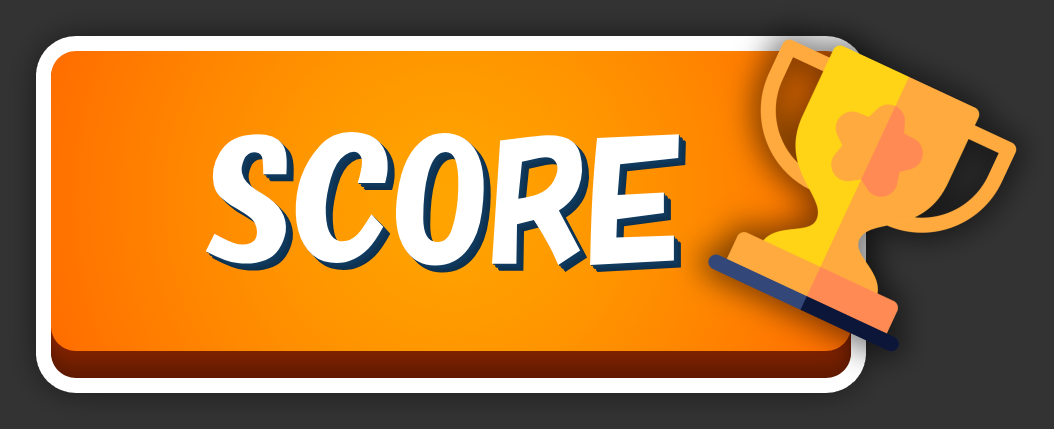
<style>
.page{position:relative;width:1054px;height:429px}
.page>*{position:absolute;margin:0}
.t1{font:160px "HGPSoeiKakupoptai";color:#ffffff}
</style>
<div class="page">
<p class="t1" style="left:205px;top:129px;width:474px;height:139px">SCORE</p>
</div>
